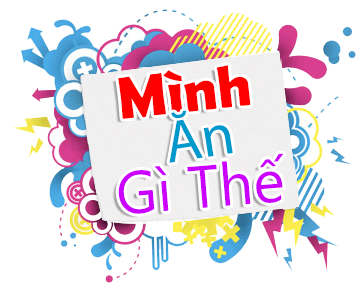
<style>
.page{position:relative;width:364px;height:292px;background:#ffffff}
.page>*{position:absolute;margin:0}
.t1{font:60px "BerlinSansFBDemi-Bold";color:#ff0000}
.t2{font:60px "MyriadPro-Regular";color:#0099cc}
.t3{font:60px "SegoeUI";color:#cc00ff}
</style>
<div class="page">
<p class="t1" style="left:118px;top:65px;width:133px;height:54px;rotate:-6deg">Mình</p>
<p class="t2" style="left:169px;top:110px;width:64px;height:53px;rotate:-9deg">Ăn</p>
<p class="t3" style="left:118px;top:153px;width:166px;height:61px;rotate:-5deg">Gì Thế</p>
</div>
